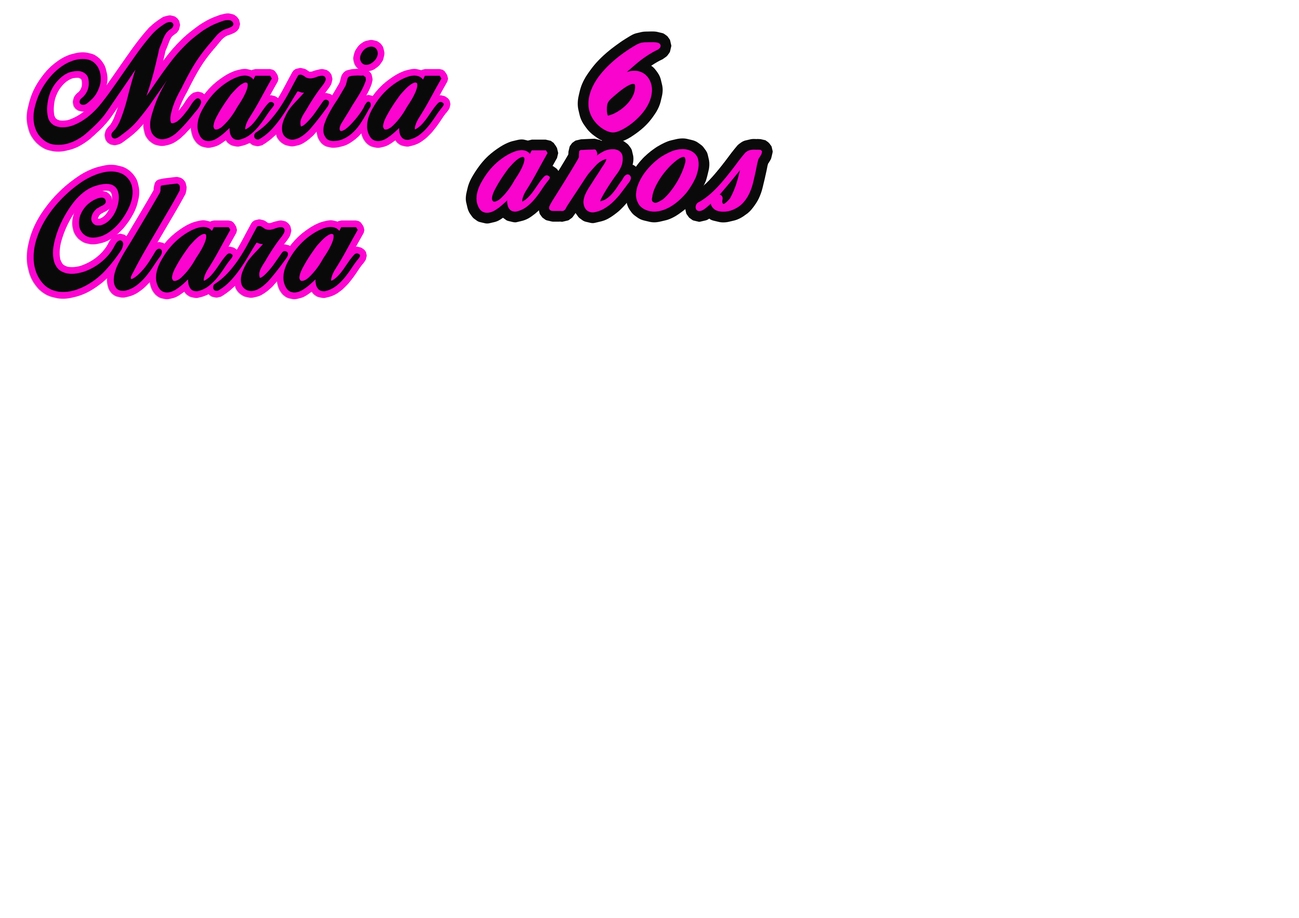
<style>
.page{position:relative;width:1299px;height:918px;background:#ffffff}
.page>*{position:absolute;margin:0}
.t1{font:137.3px/151.2px "BirdsofParadise-PersonaluseOnly";letter-spacing:0.08em;color:#090909;font-weight:bold}
.t2{font:131.1px/80.2px "BirdsofParadise-PersonaluseOnly";letter-spacing:0.16em;color:#f804cd;font-weight:bold}
.t3{font:131.1px/80.2px "BrushScriptStd";letter-spacing:0.16em;color:#f804cd;font-weight:bold}
</style>
<div class="page">
<p class="t1" style="left:33px;top:20px;width:411px;height:273px">Maria<br>Clara</p>
<p class="t2" style="left:476px;top:42px;width:286px;height:171px;text-align:center"><span class="t3">6<br></span>anos</p>
</div>
